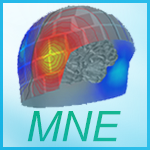
<style>
.page{position:relative;width:150px;height:150px}
.page>*{position:absolute;margin:0}
.t1{font:42px "Arial-ItalicMT";color:#0eb396;text-transform:uppercase}
</style>
<div class="page">
<p class="t1" style="left:27px;top:111px;width:94px;height:31px">MNE</p>
</div>
